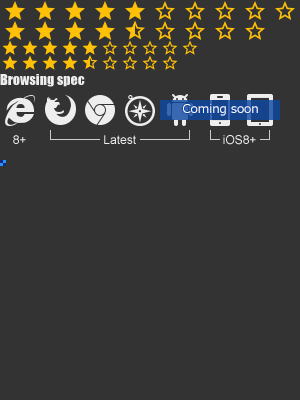
<style>
.page{position:relative;width:300px;height:400px;background:#333333}
.page>*{position:absolute;margin:0}
.t1{font:14px "Impact";color:#eeeeee}
.t2{font:12px "Meiryo";color:#fefdfe}
.t3{font:12px "ArialMT";color:#eeeeee}
</style>
<div class="page">
<p class="t1" style="left:0px;top:74px;width:85px;height:13px">Browsing spec</p>
<p class="t2" style="left:183px;top:103px;width:75px;height:13px">Coming soon</p>
<p class="t3" style="left:13px;top:135px;width:13px;height:9px">8+</p>
<p class="t3" style="left:104px;top:135px;width:32px;height:9px">Latest</p>
<p class="t3" style="left:223px;top:135px;width:33px;height:10px">iOS8+</p>
</div>
